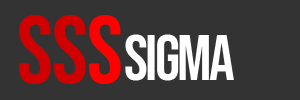
<style>
.page{position:relative;width:300px;height:100px;background:#333333}
.page>*{position:absolute;margin:0}
.t1{font:96.5px "BebasNeue-Regular";letter-spacing:-0.01em;color:#d10000}
.t2{font:96.5px "BebasNeue-Regular";letter-spacing:-0.01em;color:#ff0000}
.t3{font:64px "BebasNeue-Regular";letter-spacing:-0.04em;color:#ffffff}
</style>
<div class="page">
<p class="t1" style="left:19px;top:15px;width:102px;height:69px">SS<span class="t2">S</span></p>
<p class="t3" style="left:125px;top:34px;width:109px;height:47px">SIGMA</p>
</div>
